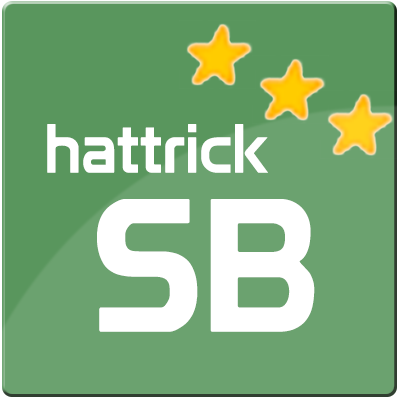
<style>
.page{position:relative;width:400px;height:400px;background:#6ba26f}
.page>*{position:absolute;margin:0}
.t1{font:68px "Prototype";color:#ffffff}
.t2{font:185px "Prototype";color:#ffffff}
</style>
<div class="page">
<p class="t1" style="left:47px;top:124px;width:221px;height:49px">hattrick</p>
<p class="t2" style="left:97px;top:199px;width:218px;height:133px">SB</p>
</div>
